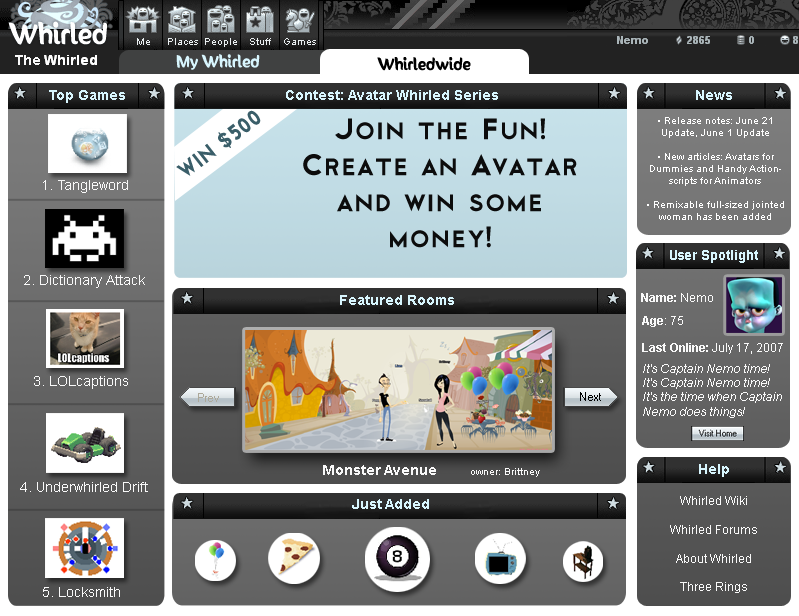
<style>
.page{position:relative;width:799px;height:616px}
.page>*{position:absolute;margin:0}
.t1{font:14px "SunnySide";color:#d8f6fe}
.t2{font:14px "Arial-BoldMT";color:#f9f9f9}
.t3{font:14px "SunnySide";color:#000000}
.t4{font:14px "Arial-BoldMT";color:#d8f6fe}
.t5{font:21.9px "Cityof";color:#3a5e69;scale:0.91 1}
.t6{font:30px "Cityof";color:#0c0c0c}
.t7{font:30px "Cityof";color:#3a5e69}
.t8{font:10px "ArialMT";color:#ffffff}
.t9{font:14px "ArialMT";color:#f9f9f9}
.t10{font:14px "Arial-BoldMT";color:#d8f6fe;scale:0.95 1}
.t11{font:12px "Arial-BoldMT";color:#f9f9f9}
.t12{font:12px "ArialMT";color:#f9f9f9}
.t13{font:12px "Arial-ItalicMT";color:#f9f9f9}
.t14{font:10px "ArialMT";color:#f9f9f9}
</style>
<div class="page">
<p class="t1" style="left:176px;top:54px;width:84px;height:16px">My Whirled</p>
<p class="t2" style="left:15px;top:55px;width:25px;height:10px">The</p>
<p class="t3" style="left:377px;top:57px;width:94px;height:14px">Whirledwide</p>
<p class="t4" style="left:49px;top:90px;width:76px;height:13px">Top Games</p>
<p class="t4" style="left:286px;top:90px;width:212px;height:10px">Contest: Avatar Whirled Series</p>
<p class="t4" style="left:696px;top:90px;width:36px;height:10px">News</p>
<p class="t5" style="left:176px;top:110px;width:85px;height:66px;rotate:-37deg">WIN $500</p>
<p class="t6" style="left:303px;top:118px;width:274px;height:130px;text-align:center">Join the Fun! Create an Avatar and win some money!<br><span class="t7">!</span></p>
<p class="t8" style="left:647px;top:117px;width:137px;height:103px;text-align:center">• Release notes: June 21 Update, June 1 Update<br><br>• New articles: Avatars for Dummies and Handy Actionscripts for Animators <br><br>• Remixable full-sized jointed woman has been added</p>
<p class="t9" style="left:43px;top:180px;width:85px;height:13px">1. Tangleword</p>
<p class="t10" style="left:670px;top:250px;width:88px;height:13px">User Spotlight</p>
<p class="t9" style="left:24px;top:275px;width:121px;height:13px">2. Dictionary Attack</p>
<p class="t11" style="left:641px;top:293px;width:72px;height:9px">Name: <span class="t12">Nemo</span></p>
<p class="t12" style="left:642px;top:316px;width:41px;height:11px"><span class="t11">Age</span>: 75</p>
<p class="t12" style="left:642px;top:343px;width:141px;height:11px"><span class="t11">Last Online: </span>July 17, 2007</p>
<p class="t13" style="left:643px;top:364px;width:139px;height:54px">It's Captain Nemo time! It's Captain Nemo time! It's the time when Captain Nemo does things!</p>
<p class="t9" style="left:34px;top:376px;width:94px;height:13px">3. LOLcaptions</p>
<p class="t14" style="left:323px;top:465px;width:217px;height:12px"><span class="t2">Monster Avenue</span>           owner: Brittney</p>
<p class="t4" style="left:699px;top:464px;width:30px;height:13px">Help</p>
<p class="t9" style="left:20px;top:482px;width:128px;height:10px">4. Underwhirled Drift</p>
<p class="t12" style="left:670px;top:496px;width:87px;height:97px;text-align:center">Whirled Wiki<br><br>Whirled Forums<br><br>About Whirled<br><br>Three Rings</p>
<p class="t9" style="left:43px;top:587px;width:77px;height:10px">5. Locksmith</p>
</div>
